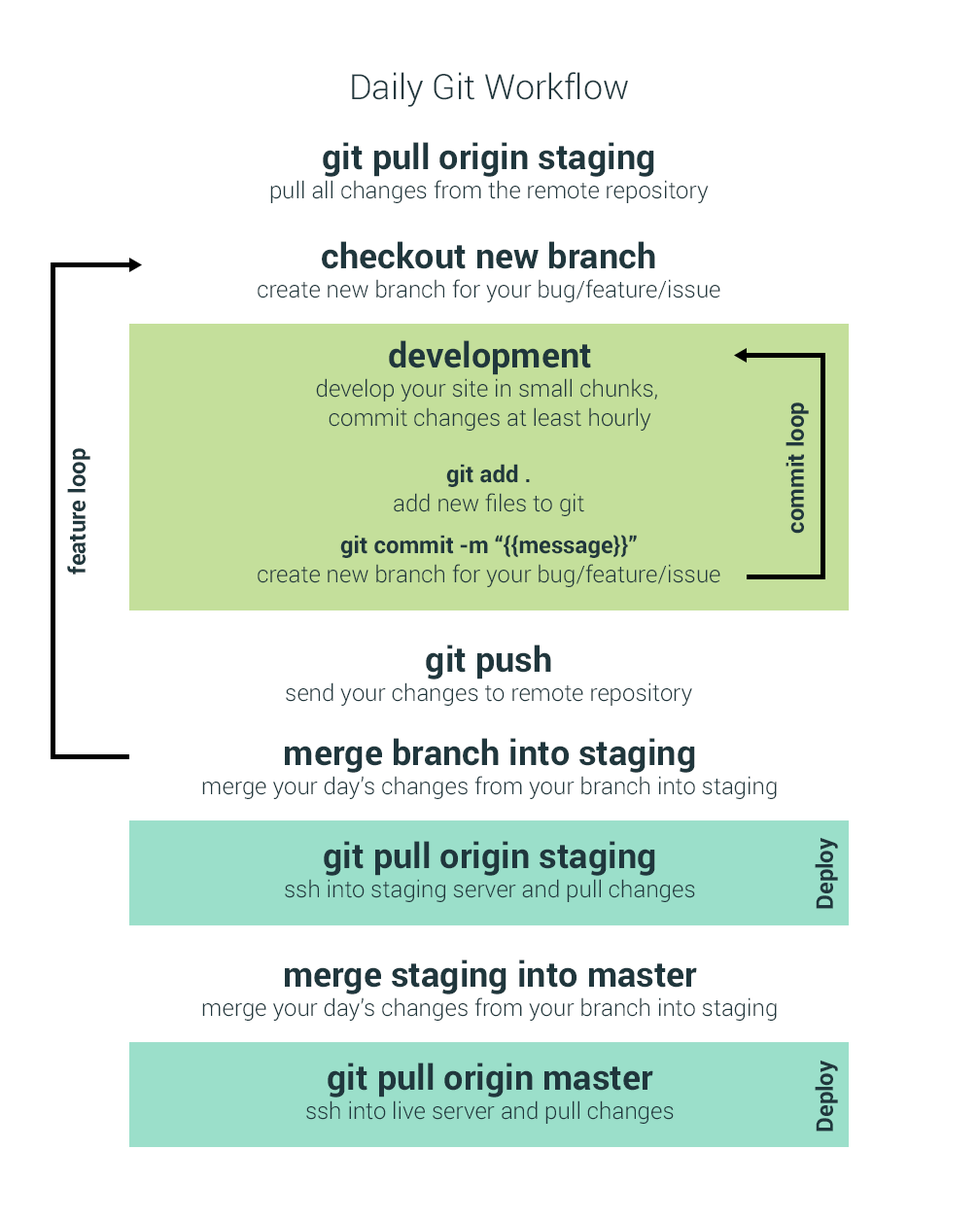
<style>
.page{position:relative;width:978px;height:1220px;background:#ffffff}
.page>*{position:absolute;margin:0}
.t1{font:35px "Roboto-Light";color:#20373d}
.t2{font:23.3px/23.3px "Roboto-Light";color:#20373d}
.t3{font:35px/23.3px "Roboto-Bold";color:#20373d}
.t4{font:23.3px "Roboto-Bold";color:#20373d}
.t5{font:23.3px/23.3px "Roboto-Bold";color:#20373d}
</style>
<div class="page">
<p class="t1" style="left:352px;top:72px;width:276px;height:35px">Daily Git Workflow</p>
<p class="t2" style="left:270px;top:142px;width:438px;height:61px;text-align:center"><span class="t3">git pull origin staging<br></span>pull all changes from the remote repository</p>
<p class="t2" style="left:258px;top:241px;width:462px;height:61px;text-align:center"><span class="t3">checkout new branch<br></span>create new branch for your bug/feature/issue</p>
<p class="t2" style="left:316px;top:340px;width:341px;height:91px;text-align:center"><span class="t3">development<br></span>develop your site in small chunks, <br>commit changes at least hourly</p>
<p class="t4" style="left:785px;top:402px;width:24px;height:132px;rotate:-90deg">commit loop</p>
<p class="t4" style="left:67px;top:448px;width:23px;height:126px;rotate:-90deg">feature loop</p>
<p class="t2" style="left:394px;top:464px;width:190px;height:52px;text-align:center"><span class="t5">git add .<br></span>add new files to git</p>
<p class="t2" style="left:258px;top:535px;width:462px;height:52px;text-align:center"><span class="t5">git commit -m “{{message}}”<br></span>create new branch for your bug/feature/issue</p>
<p class="t2" style="left:286px;top:644px;width:406px;height:62px;text-align:center"><span class="t3">git push<br></span>send your changes to remote repository</p>
<p class="t2" style="left:202px;top:738px;width:575px;height:61px;text-align:center"><span class="t3">merge branch into staging<br></span>merge your day’s changes from your branch into staging</p>
<p class="t2" style="left:285px;top:841px;width:410px;height:61px;text-align:center"><span class="t3">git pull origin staging<br></span>ssh into staging server and pull changes</p>
<p class="t4" style="left:814px;top:837px;width:24px;height:72px;rotate:-90deg">Deploy</p>
<p class="t2" style="left:202px;top:959px;width:575px;height:61px;text-align:center"><span class="t3">merge staging into master<br></span>merge your day’s changes from your branch into staging</p>
<p class="t4" style="left:814px;top:1059px;width:24px;height:72px;rotate:-90deg">Deploy</p>
<p class="t2" style="left:306px;top:1062px;width:367px;height:61px;text-align:center"><span class="t3">git pull origin master<br></span>ssh into live server and pull changes</p>
</div>
